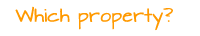
<style>
.page{position:relative;width:200px;height:36px;background:#ffffff}
.page>*{position:absolute;margin:0}
.t1{font:16px "ArchitectsDaughter";color:#ff9900}
</style>
<div class="page">
<p class="t1" style="left:15px;top:6px;width:158px;height:25px">Which property?</p>
</div>
